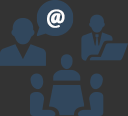
<style>
.page{position:relative;width:128px;height:116px;background:#333333}
.page>*{position:absolute;margin:0}
.t1{font:21px "HoboStd";color:#fcfcfc;font-weight:bold}
</style>
<div class="page">
<p class="t1" style="left:47px;top:9px;width:18px;height:19px">@</p>
</div>
